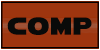
<style>
.page{position:relative;width:100px;height:50px;background:#9e350f}
.page>*{position:absolute;margin:0}
.t1{font:24.2px "StarJedi";letter-spacing:0.06em;color:#0a0a09;font-weight:bold;scale:1.03 1}
</style>
<div class="page">
<p class="t1" style="left:7px;top:17px;width:85px;height:18px">comp</p>
</div>
